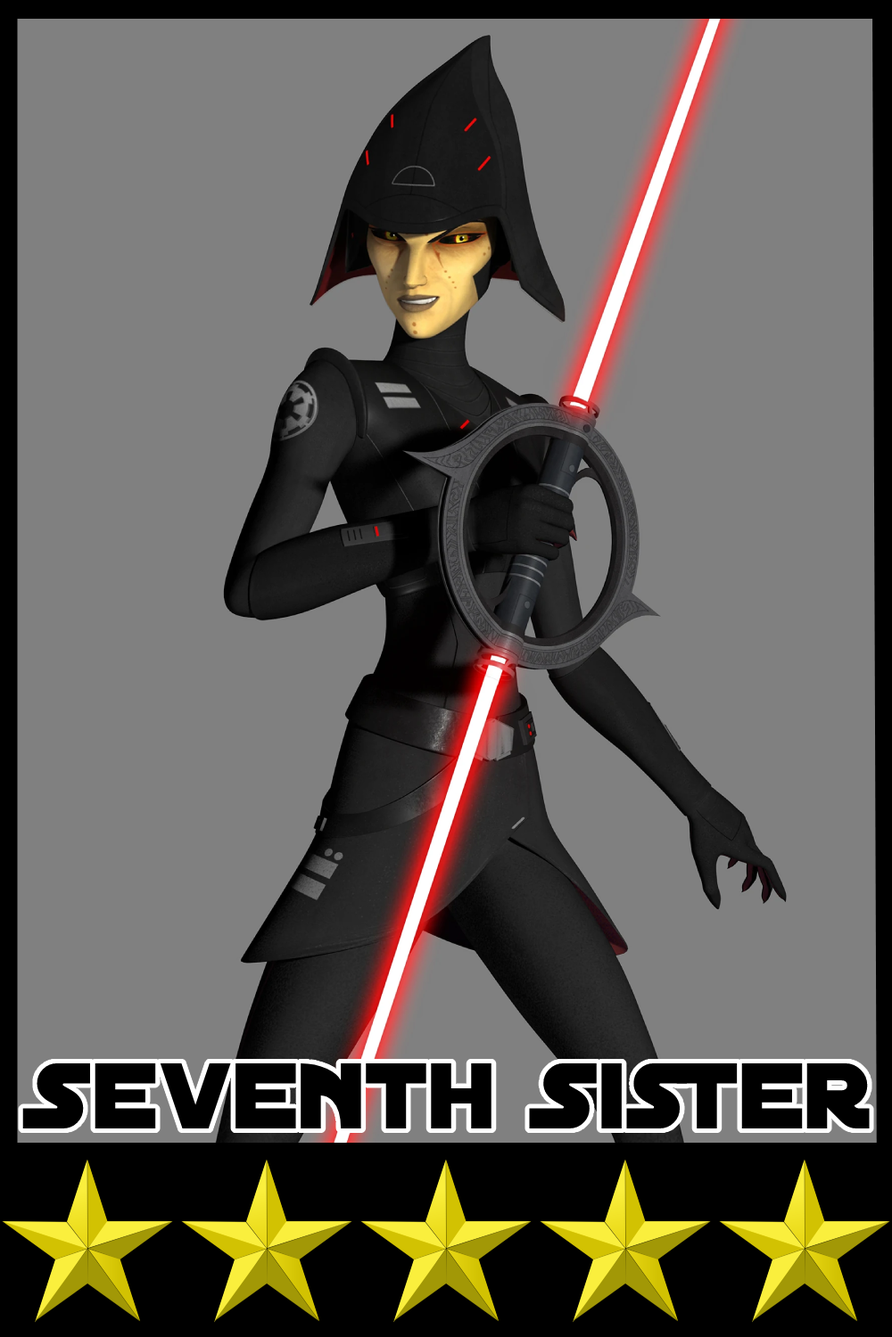
<style>
.page{position:relative;width:892px;height:1337px;background:#808080}
.page>*{position:absolute;margin:0}
.t1{font:100.2px "DistantGalaxy";color:#000000}
</style>
<div class="page">
<p class="t1" style="left:22px;top:1064px;width:847px;height:65px">Seventh Sister</p>
</div>
